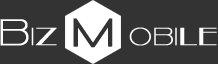
<style>
.page{position:relative;width:218px;height:64px;background:#333333}
.page>*{position:absolute;margin:0}
.t1{font:24px "Kilsonburg-Regular";color:#ffffff;font-weight:bold}
.t2{font:36px "Kilsonburg-Regular";color:#ffffff;font-weight:bold}
</style>
<div class="page">
<p class="t1" style="left:0px;top:19px;width:217px;height:27px"><span class="t2">B</span>iz      obile</p>
</div>
